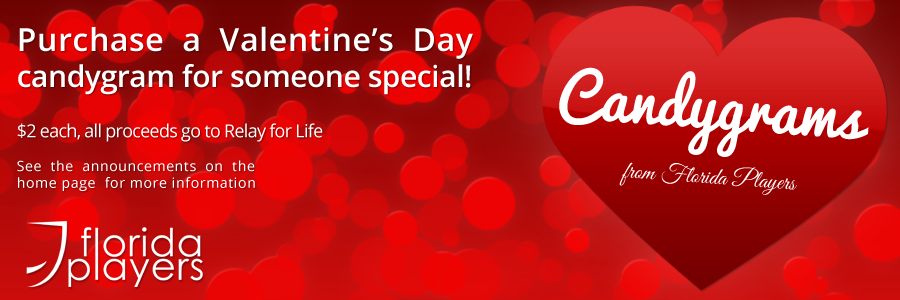
<style>
.page{position:relative;width:900px;height:300px}
.page>*{position:absolute;margin:0}
.t1{font:18px "OpenSans";letter-spacing:-0.04em;color:#ffffff}
.t2{font:32px "OpenSans-Semibold";letter-spacing:0.02em;color:#ffffff}
.t3{font:30px "OpenSans-Semibold";letter-spacing:-0.015em;color:#ffffff}
.t4{font:14px "OpenSans";letter-spacing:0.045em;color:#ffffff}
.t5{font:14px "OpenSans";letter-spacing:0.047em;color:#ffffff}
.t6{font:60px "Pacifico";color:#ffffff}
.t7{font:24px "GreatVibes-Regular";color:#ffffff}
</style>
<div class="page">
<p class="t1" style="left:17px;top:26px;width:456px;height:165px"><span class="t2">Purchase  a  Valentine’s  Day<br></span><span class="t3">candygram for someone special!<br><br></span>$2 each, all proceeds go to Relay for Life<br><br><span class="t4">See  the  announcements  on  the <br></span><span class="t5">home page  for more information</span></p>
<p class="t6" style="left:559px;top:67px;width:310px;height:90px;rotate:4deg">Candygrams</p>
<p class="t7" style="left:619px;top:162px;width:178px;height:33px;rotate:4deg">from Florida Players</p>
</div>
